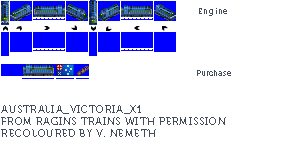
<style>
.page{position:relative;width:300px;height:159px;background:#ffffff}
.page>*{position:absolute;margin:0}
.t1{font:8px "Museo700-Regular";letter-spacing:0.075em;color:#444c5c}
.t2{font:8px "Museo700-Regular";color:#444c5c}
.t3{font:10px "Museo700-Regular";letter-spacing:0.075em;color:#444c5c;text-transform:uppercase}
</style>
<div class="page">
<p class="t1" style="left:199px;top:8px;width:28px;height:8px">Engine</p>
<p class="t2" style="left:197px;top:70px;width:34px;height:6px">Purchase</p>
<p class="t3" style="left:1px;top:105px;width:225px;height:32px">Australia_Victoria_X1<br>from ragins trains with permission<br>RECOLOURED BY v. nemeth</p>
</div>
